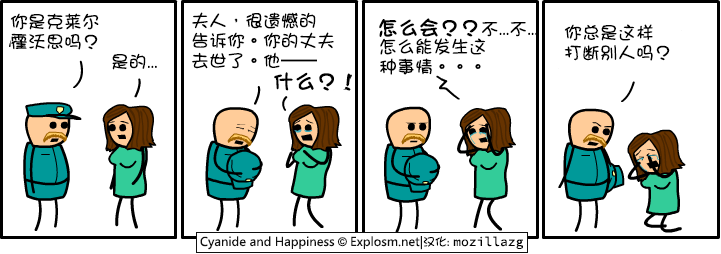
<style>
.page{position:relative;width:721px;height:254px;background:#ffffff}
.page>*{position:absolute;margin:0}
.t1{font:18px/20px "DFGirl";color:#000000}
.t2{font:18px "DFGirl";color:#000000}
.t3{font:20px "DFGirl";color:#000000;font-weight:bold}
.t4{font:21px "DFGirl";color:#000000;font-weight:bold}
</style>
<div class="page">
<p class="t1" style="left:10px;top:13px;width:89px;height:37px">你是克莱尔<br>霍沃思吗？</p>
<p class="t1" style="left:192px;top:12px;width:142px;height:57px">夫人，很遗憾的<br>告诉你。你的丈夫<br>去世了。他——</p>
<p class="t2" style="left:379px;top:18px;width:159px;height:19px"><span class="t3">怎么会？？</span>不...不...</p>
<p class="t1" style="left:564px;top:24px;width:106px;height:37px">你总是这样<br>打断别人吗？</p>
<p class="t1" style="left:380px;top:38px;width:106px;height:37px">怎么能发生这<br>种事情。。。</p>
<p class="t2" style="left:112px;top:53px;width:45px;height:17px">是的...</p>
<p class="t4" style="left:274px;top:72px;width:77px;height:19px">什么？！</p>
</div>
